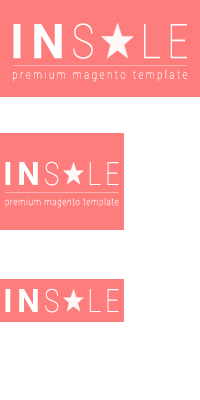
<style>
.page{position:relative;width:200px;height:400px;background:#ffffff}
.page>*{position:absolute;margin:0}
.t1{font:48px "Roboto-Bold";letter-spacing:0.15em;color:#ffffff;text-transform:uppercase}
.t2{font:48px "Roboto-Thin";letter-spacing:0.15em;color:#ffffff;scale:0.79 1}
.t3{font:12px "Roboto-Thin";letter-spacing:0.25em;color:#ffffff;scale:0.82 1}
.t4{font:32px "Roboto-Bold";letter-spacing:0.15em;color:#ffffff;text-transform:uppercase}
.t5{font:32px "Roboto-Thin";letter-spacing:0.15em;color:#ffffff;scale:0.79 1}
.t6{font:10px "Roboto-Thin";letter-spacing:0.08em;color:#ffffff;scale:0.82 1}
</style>
<div class="page">
<p class="t1" style="left:13px;top:23px;width:80px;height:36px">IN<span class="t2">S</span></p>
<p class="t2" style="left:144px;top:24px;width:43px;height:35px">LE</p>
<p class="t3" style="left:13px;top:69px;width:175px;height:13px">premium magento template</p>
<p class="t4" style="left:5px;top:161px;width:54px;height:25px">IN<span class="t5">S</span></p>
<p class="t5" style="left:89px;top:162px;width:30px;height:23px">LE</p>
<p class="t6" style="left:5px;top:197px;width:114px;height:11px">premium magento template</p>
<p class="t4" style="left:5px;top:288px;width:54px;height:25px">IN<span class="t5">S</span></p>
<p class="t5" style="left:89px;top:289px;width:30px;height:23px">LE</p>
</div>
